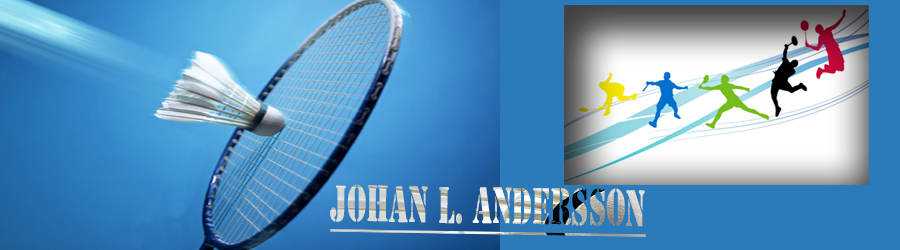
<style>
.page{position:relative;width:900px;height:250px}
.page>*{position:absolute;margin:0}
.t1{font:48px "StencilStd";text-decoration:underline;scale:0.57 1}
</style>
<div class="page">
<p class="t1" style="left:330px;top:184px;width:316px;height:53px;rotate:1deg">Johan L. Andersson</p>
</div>
